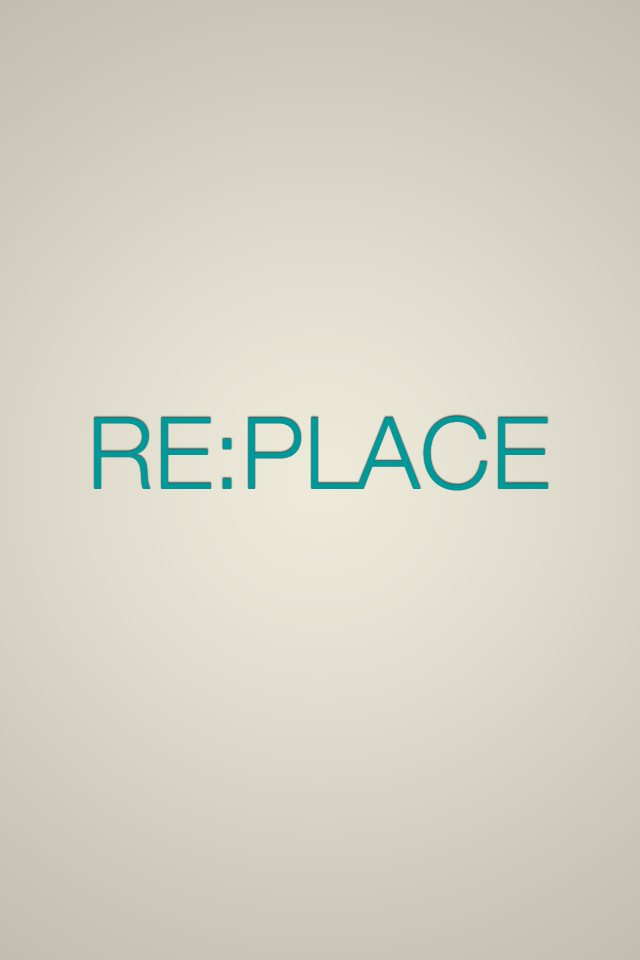
<style>
.page{position:relative;width:640px;height:960px}
.page>*{position:absolute;margin:0}
.t1{font:100px "HelveticaNeue-Light";color:#009999;text-transform:uppercase}
</style>
<div class="page">
<p class="t1" style="left:94px;top:416px;width:454px;height:75px">RE:PLACE</p>
</div>
